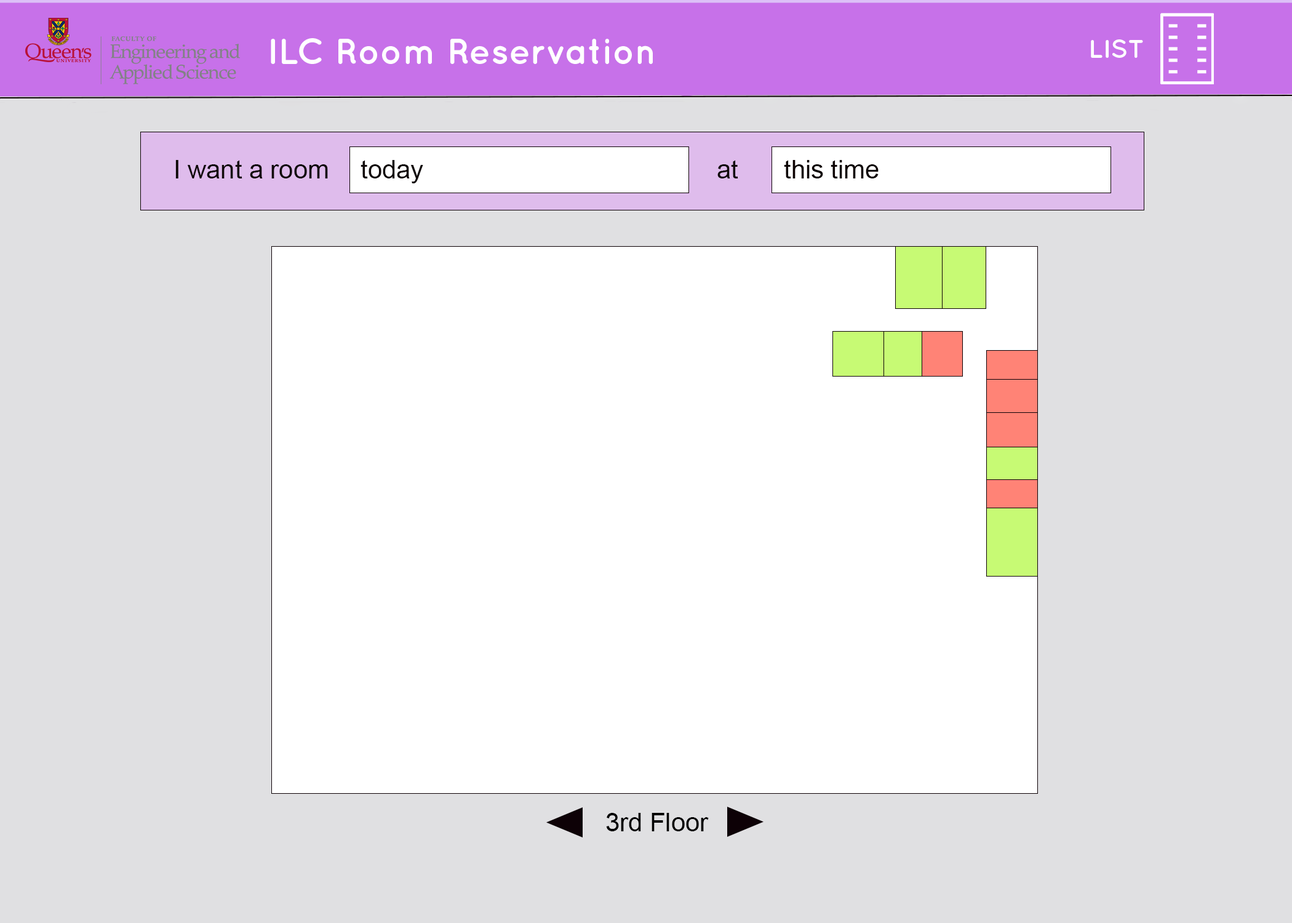
<style>
.page{position:relative;width:1292px;height:923px;background:#e0e0e2}
.page>*{position:absolute;margin:0}
.t1{font:35.9px "QuicksandBold-Regular";color:#ffffff}
.t2{font:25.6px "QuicksandBold-Regular";color:#ffffff}
.t3{font:25.6px "ArialMT";color:#100909}
.t4{font:25.6px "ArialMT";color:#0c0101}
.t5{font:25.6px "ArialMT";color:#000000}
</style>
<div class="page">
<p class="t1" style="left:271px;top:38px;width:382px;height:26px">ILC Room Reservation</p>
<p class="t2" style="left:1091px;top:39px;width:52px;height:19px">LIST</p>
<p class="t3" style="left:175px;top:160px;width:153px;height:18px">I want a room</p>
<p class="t3" style="left:361px;top:160px;width:62px;height:23px">today</p>
<p class="t3" style="left:717px;top:160px;width:21px;height:18px">at</p>
<p class="t4" style="left:784px;top:160px;width:95px;height:18px">this time</p>
<p class="t5" style="left:606px;top:813px;width:103px;height:18px">3rd Floor</p>
</div>
